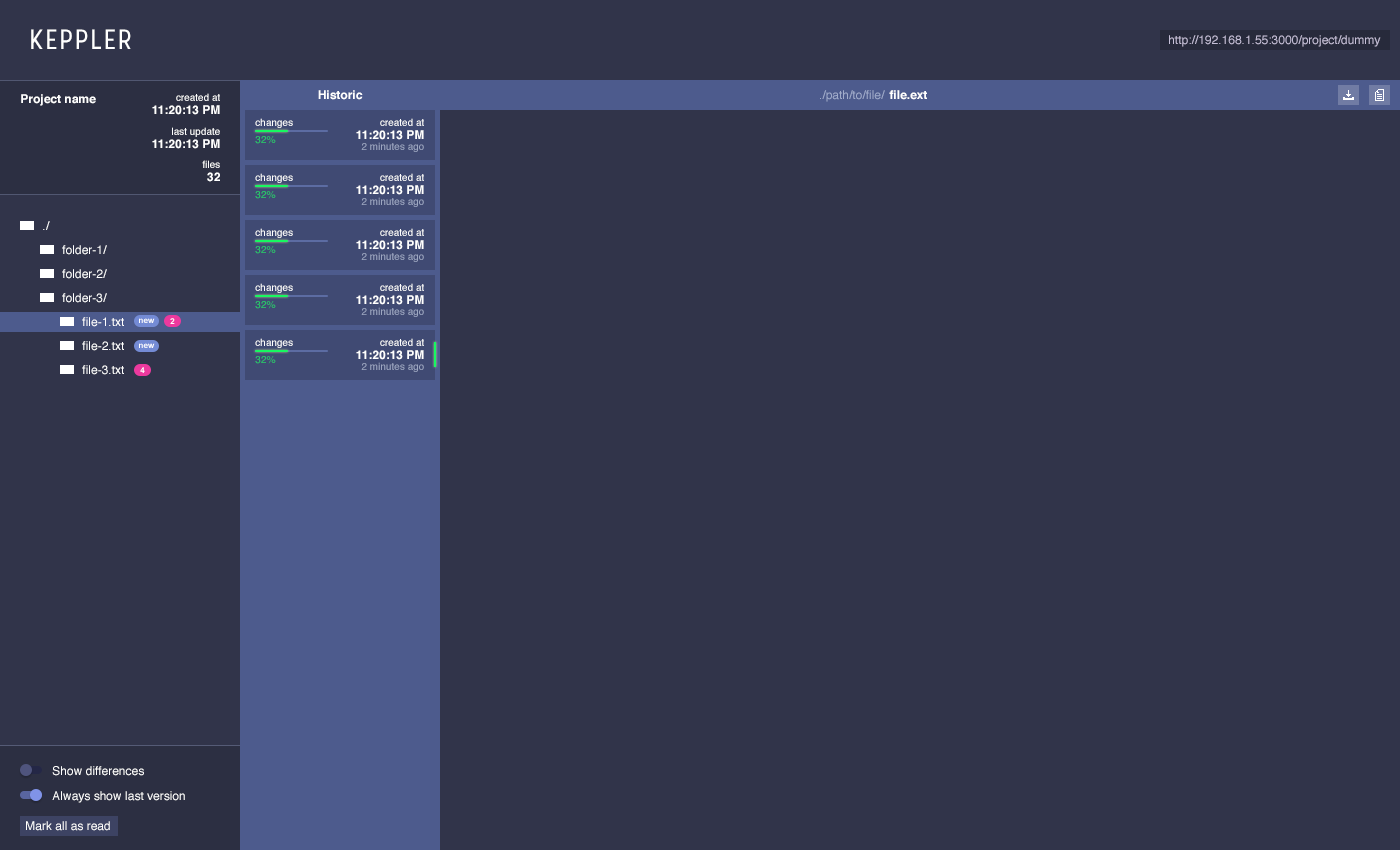
<style>
.page{position:relative;width:1400px;height:850px;background:#31344a}
.page>*{position:absolute;margin:0}
.t1{font:28px "Stellar-Regular";letter-spacing:0.05em;color:#ffffff}
.t2{font:12px "Helvetica";color:#c6c0d8}
.t3{font:12px "Helvetica-Bold";color:#ffffff}
.t4{font:10px "Helvetica";color:#ffffff}
.t5{font:12px "Helvetica";color:#a1accb}
.t6{font:10px "Helvetica";color:#25ce67}
.t7{font:10px "Helvetica";color:#9da7c1}
.t8{font:12px "Helvetica";color:#ffffff}
.t9{font:8px "Arial-BoldMT";color:#ffffff}
</style>
<div class="page">
<p class="t1" style="left:31px;top:29px;width:100px;height:20px">KEPPLER</p>
<p class="t2" style="left:1169px;top:35px;width:212px;height:12px">http://192.168.1.55:3000/project/dummy</p>
<p class="t3" style="left:21px;top:94px;width:75px;height:12px">Project name</p>
<p class="t4" style="left:176px;top:93px;width:44px;height:8px">created at</p>
<p class="t3" style="left:318px;top:90px;width:45px;height:10px">Historic</p>
<p class="t5" style="left:820px;top:90px;width:65px;height:12px">./path/to/file/</p>
<p class="t3" style="left:889px;top:90px;width:38px;height:10px">file.ext</p>
<p class="t3" style="left:152px;top:105px;width:68px;height:10px">11:20:13 PM</p>
<p class="t4" style="left:255px;top:118px;width:38px;height:10px">changes</p>
<p class="t4" style="left:380px;top:118px;width:44px;height:8px">created at</p>
<p class="t4" style="left:172px;top:127px;width:48px;height:10px">last update</p>
<p class="t6" style="left:255px;top:136px;width:21px;height:8px">32%</p>
<p class="t3" style="left:356px;top:130px;width:68px;height:10px">11:20:13 PM</p>
<p class="t3" style="left:152px;top:139px;width:68px;height:10px">11:20:13 PM</p>
<p class="t7" style="left:361px;top:142px;width:63px;height:10px">2 minutes ago</p>
<p class="t4" style="left:202px;top:160px;width:18px;height:8px">files</p>
<p class="t3" style="left:207px;top:172px;width:13px;height:10px">32</p>
<p class="t4" style="left:255px;top:173px;width:38px;height:10px">changes</p>
<p class="t4" style="left:380px;top:173px;width:44px;height:8px">created at</p>
<p class="t3" style="left:356px;top:185px;width:68px;height:10px">11:20:13 PM</p>
<p class="t6" style="left:255px;top:191px;width:21px;height:8px">32%</p>
<p class="t7" style="left:361px;top:197px;width:63px;height:10px">2 minutes ago</p>
<p class="t8" style="left:43px;top:221px;width:7px;height:9px">./</p>
<p class="t4" style="left:255px;top:228px;width:38px;height:10px">changes</p>
<p class="t4" style="left:380px;top:228px;width:44px;height:8px">created at</p>
<p class="t8" style="left:62px;top:245px;width:45px;height:10px">folder-1/</p>
<p class="t6" style="left:255px;top:246px;width:21px;height:8px">32%</p>
<p class="t3" style="left:356px;top:240px;width:68px;height:10px">11:20:13 PM</p>
<p class="t7" style="left:361px;top:252px;width:63px;height:10px">2 minutes ago</p>
<p class="t8" style="left:62px;top:269px;width:45px;height:10px">folder-2/</p>
<p class="t8" style="left:62px;top:293px;width:45px;height:10px">folder-3/</p>
<p class="t4" style="left:255px;top:283px;width:38px;height:10px">changes</p>
<p class="t4" style="left:380px;top:283px;width:44px;height:8px">created at</p>
<p class="t6" style="left:255px;top:301px;width:21px;height:8px">32%</p>
<p class="t3" style="left:356px;top:295px;width:68px;height:10px">11:20:13 PM</p>
<p class="t8" style="left:82px;top:317px;width:42px;height:10px">file-1.txt</p>
<p class="t9" style="left:139px;top:318px;width:16px;height:5px">new</p>
<p class="t9" style="left:170px;top:318px;width:5px;height:6px">2</p>
<p class="t7" style="left:361px;top:307px;width:63px;height:10px">2 minutes ago</p>
<p class="t8" style="left:82px;top:341px;width:42px;height:10px">file-2.txt</p>
<p class="t4" style="left:255px;top:338px;width:38px;height:10px">changes</p>
<p class="t4" style="left:380px;top:338px;width:44px;height:8px">created at</p>
<p class="t9" style="left:139px;top:343px;width:16px;height:5px">new</p>
<p class="t3" style="left:356px;top:350px;width:68px;height:10px">11:20:13 PM</p>
<p class="t8" style="left:82px;top:365px;width:42px;height:10px">file-3.txt</p>
<p class="t6" style="left:255px;top:356px;width:21px;height:8px">32%</p>
<p class="t7" style="left:361px;top:362px;width:63px;height:10px">2 minutes ago</p>
<p class="t9" style="left:140px;top:367px;width:5px;height:6px">4</p>
<p class="t8" style="left:52px;top:766px;width:92px;height:10px">Show differences</p>
<p class="t8" style="left:52px;top:791px;width:133px;height:12px">Always show last version</p>
<p class="t8" style="left:26px;top:821px;width:84px;height:10px">Mark all as read</p>
</div>
